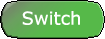
<style>
.page{position:relative;width:105px;height:39px;background:#56b949}
.page>*{position:absolute;margin:0}
.t1{font:18px "Verdana";color:#ffffff}
</style>
<div class="page">
<p class="t1" style="left:22px;top:11px;width:58px;height:14px">Switch</p>
</div>
